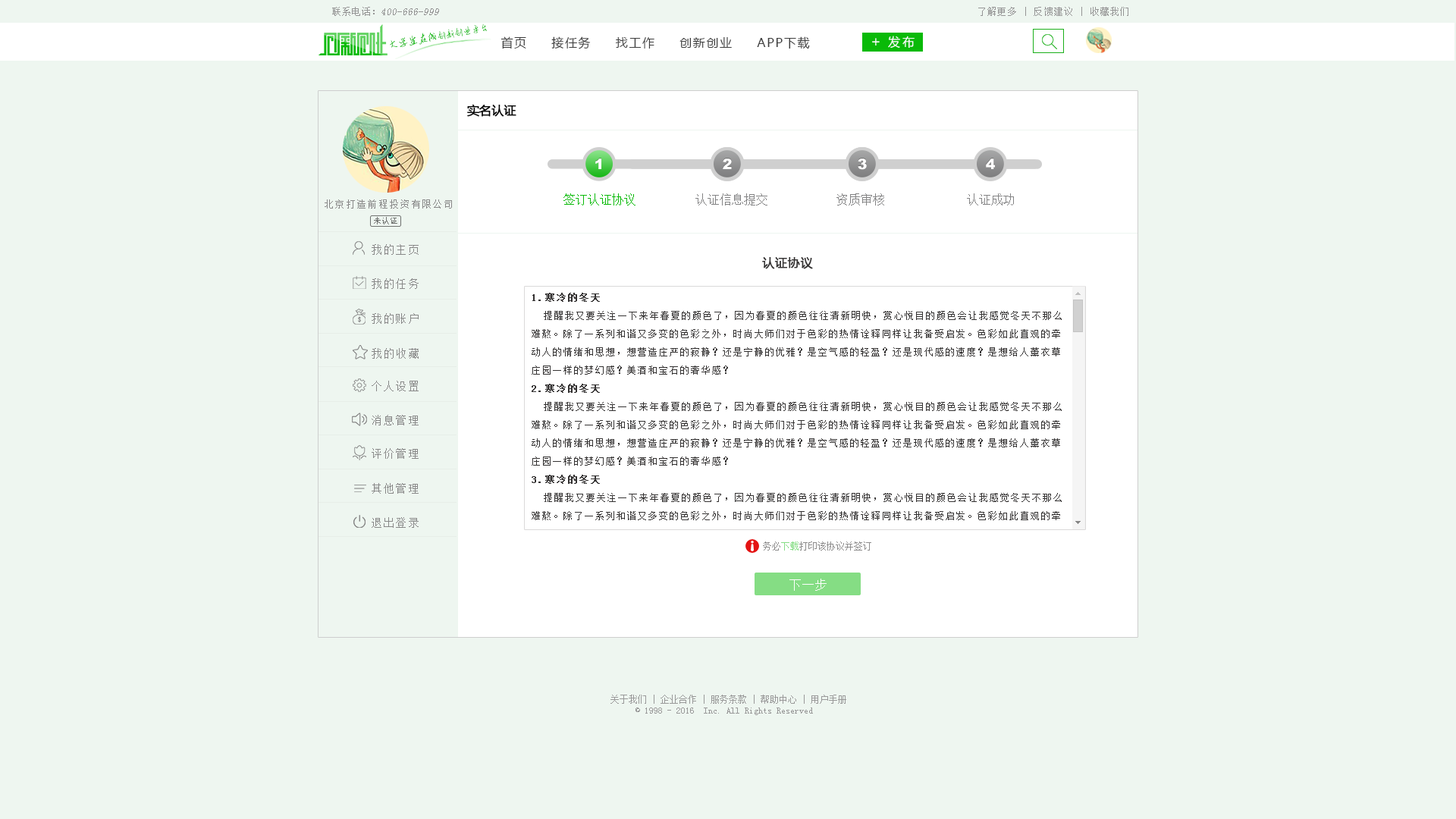
<style>
.page{position:relative;width:1456px;height:819px;background:#eef6f0}
.page>*{position:absolute;margin:0}
.t1{font:10.1px "SimSun";color:#959595;font-style:italic}
.t2{font:10.1px "SimSun";color:#959595}
.t3{font:9.1px "SimSun";letter-spacing:0.1em;color:#959494}
.t4{font:9.4px "AnJingCheng-Xing-2.0";letter-spacing:-0.01em;color:#09ba08}
.t5{font:10.6px "AnJingCheng-Xing-2.0";letter-spacing:-0.01em;color:#09ba08}
.t6{font:12.1px "MicrosoftYaHei";letter-spacing:0.1em;color:#3e3e3e}
.t7{font:14.2px "MicrosoftYaHei";letter-spacing:0.2em;color:#ffffff}
.t8{font:12.1px "MicrosoftYaHei";letter-spacing:0.2em;color:#ffffff}
.t9{font:12.1px "MicrosoftYaHei";letter-spacing:0.01em;color:#000000;font-weight:bold}
.t10{font:14.4px "Arial-Black";color:#ffffff}
.t11{font:12.1px "SimSun";color:#09ba08}
.t12{font:12.1px "SimSun";color:#838384}
.t13{font:10.1px "SimSun";letter-spacing:0.1em;color:#888888}
.t14{font:8.1px "SimSun";color:#727472}
.t15{font:11.1px "SimSun";letter-spacing:0.1em;color:#888888}
.t16{font:12.1px "MicrosoftYaHei";letter-spacing:0.05em;color:#343232;font-weight:bold}
.t17{font:10.1px/18.2px "SimSun";letter-spacing:0.075em;color:#343232}
.t18{font:10.1px/18.2px "SimSun";letter-spacing:0.075em;color:#343232;font-weight:bold}
.t19{font:9.1px "SimSun";color:#8e8d8d}
.t20{font:9.1px "SimSun";color:#85dd84}
.t21{font:12.1px "SimSun";letter-spacing:0.075em;color:#ffffff}
.t22{font:9.1px "SimSun";color:#999999}
</style>
<div class="page">
<p class="t1" style="left:332px;top:7px;width:107px;height:9px"><span class="t2">联系电话：</span>400-666-999</p>
<p class="t3" style="left:978px;top:7px;width:150px;height:9px">了解更多 | 反馈建议 | 收藏我们</p>
<p class="t4" style="left:390px;top:24px;width:98px;height:24px;rotate:-10deg"><span class="t5">大学生在线</span>创新创业平台</p>
<p class="t6" style="left:500px;top:36px;width:310px;height:13px">首页     接任务     找工作     创新创业     APP下载</p>
<p class="t7" style="left:872px;top:38px;width:8px;height:7px">+</p>
<p class="t8" style="left:888px;top:36px;width:27px;height:12px">发布</p>
<p class="t9" style="left:467px;top:104px;width:49px;height:13px">实名认证</p>
<p class="t10" style="left:595px;top:158px;width:6px;height:11px">1</p>
<p class="t10" style="left:723px;top:158px;width:9px;height:11px">2</p>
<p class="t10" style="left:858px;top:158px;width:9px;height:12px">3</p>
<p class="t10" style="left:986px;top:158px;width:9px;height:11px">4</p>
<p class="t11" style="left:563px;top:193px;width:72px;height:13px">签订认证协议</p>
<p class="t12" style="left:695px;top:193px;width:72px;height:13px">认证信息提交</p>
<p class="t12" style="left:836px;top:193px;width:48px;height:13px">资质审核</p>
<p class="t12" style="left:967px;top:193px;width:47px;height:13px">认证成功</p>
<p class="t13" style="left:325px;top:199px;width:127px;height:10px">北京打造前程投资有限公司</p>
<p class="t14" style="left:374px;top:217px;width:23px;height:7px">未认证</p>
<p class="t15" style="left:372px;top:244px;width:47px;height:11px">我的主页</p>
<p class="t16" style="left:762px;top:257px;width:51px;height:12px">认证协议</p>
<p class="t15" style="left:372px;top:278px;width:47px;height:11px">我的任务</p>
<p class="t17" style="left:532px;top:293px;width:530px;height:227px"><span class="t18">1.寒冷的冬天<br></span>  提醒我又要关注一下来年春夏的颜色了，因为春夏的颜色往往清新明快，赏心悦目的颜色会让我感觉冬天不那么难熬。除了一系列和谐又多变的色彩之外，时尚大师们对于色彩的热情诠释同样让我备受启发。色彩如此直观的牵动人的情绪和思想，想营造庄严的寂静？还是宁静的优雅？是空气感的轻盈？还是现代感的速度？是想给人薰衣草庄园一样的梦幻感？美酒和宝石的奢华感？<br><span class="t18">2.寒冷的冬天<br></span>  提醒我又要关注一下来年春夏的颜色了，因为春夏的颜色往往清新明快，赏心悦目的颜色会让我感觉冬天不那么难熬。除了一系列和谐又多变的色彩之外，时尚大师们对于色彩的热情诠释同样让我备受启发。色彩如此直观的牵动人的情绪和思想，想营造庄严的寂静？还是宁静的优雅？是空气感的轻盈？还是现代感的速度？是想给人薰衣草庄园一样的梦幻感？美酒和宝石的奢华感？<br><span class="t18">3.寒冷的冬天<br></span>  提醒我又要关注一下来年春夏的颜色了，因为春夏的颜色往往清新明快，赏心悦目的颜色会让我感觉冬天不那么难熬。除了一系列和谐又多变的色彩之外，时尚大师们对于色彩的热情诠释同样让我备受启发。色彩如此直观的牵动人的情绪和思想，想营造庄严的寂静？还是宁静的优雅？是空气感的轻盈？还是现代感的速度？是想给人薰衣草庄园一样的梦幻感？美酒和宝石的奢华感？<br><span class="t18">4.寒冷的冬天<br></span>  提醒我又要关注一下来年春夏的颜色了，因为春夏的颜色往往清新明快，赏心悦目的颜色会让我感觉冬天不那么难熬。除了一系列和谐又多变的色彩之外，时尚大师们对于色彩的热情诠释同样让我备受启发。色彩如此直观的牵动人的情绪和思想，想营造庄严的寂静？还是宁静的优雅？是空气感的轻盈？还是现代感的速度？是想给人薰衣草庄园一样的梦幻感？美酒和宝石的奢华感？</p>
<p class="t15" style="left:372px;top:313px;width:47px;height:11px">我的账户</p>
<p class="t15" style="left:372px;top:348px;width:47px;height:11px">我的收藏</p>
<p class="t15" style="left:372px;top:381px;width:47px;height:10px">个人设置</p>
<p class="t15" style="left:372px;top:415px;width:47px;height:10px">消息管理</p>
<p class="t15" style="left:372px;top:448px;width:47px;height:11px">评价管理</p>
<p class="t15" style="left:372px;top:483px;width:47px;height:11px">其他管理</p>
<p class="t15" style="left:372px;top:517px;width:47px;height:11px">退出登录</p>
<p class="t19" style="left:763px;top:541px;width:108px;height:10px">务必<span class="t20">下载</span>打印该协议并签订</p>
<p class="t21" style="left:789px;top:579px;width:38px;height:12px">下一步</p>
<p class="t22" style="left:610px;top:695px;width:236px;height:20px;text-align:center">关于我们 | 企业合作 | 服务条款 | 帮助中心 | 用户手册<br>© 1998 - 2016  Inc. All Rights Reserved</p>
</div>
